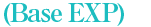
<style>
.page{position:relative;width:151px;height:27px;background:#ffffff}
.page>*{position:absolute;margin:0}
.t1{font:26px "RyuminPro-ExBold";letter-spacing:-0.08em;color:#1cbdc0}
</style>
<div class="page">
<p class="t1" style="left:4px;top:3px;width:120px;height:23px">(Base EXP)</p>
</div>
